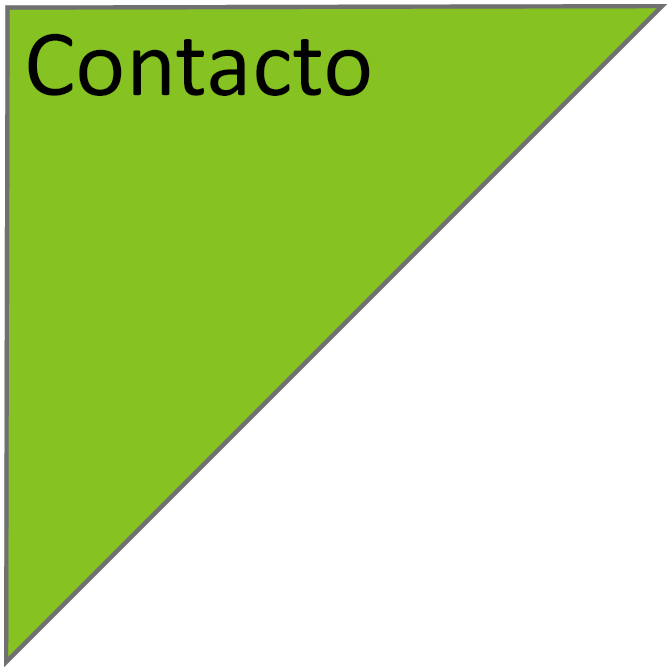
<style>
.page{position:relative;width:670px;height:670px;background:#ffffff}
.page>*{position:absolute;margin:0}
.t1{font:95.8px "Calibri";color:#000000}
</style>
<div class="page">
<p class="t1" style="left:28px;top:33px;width:342px;height:63px">Contacto</p>
</div>
